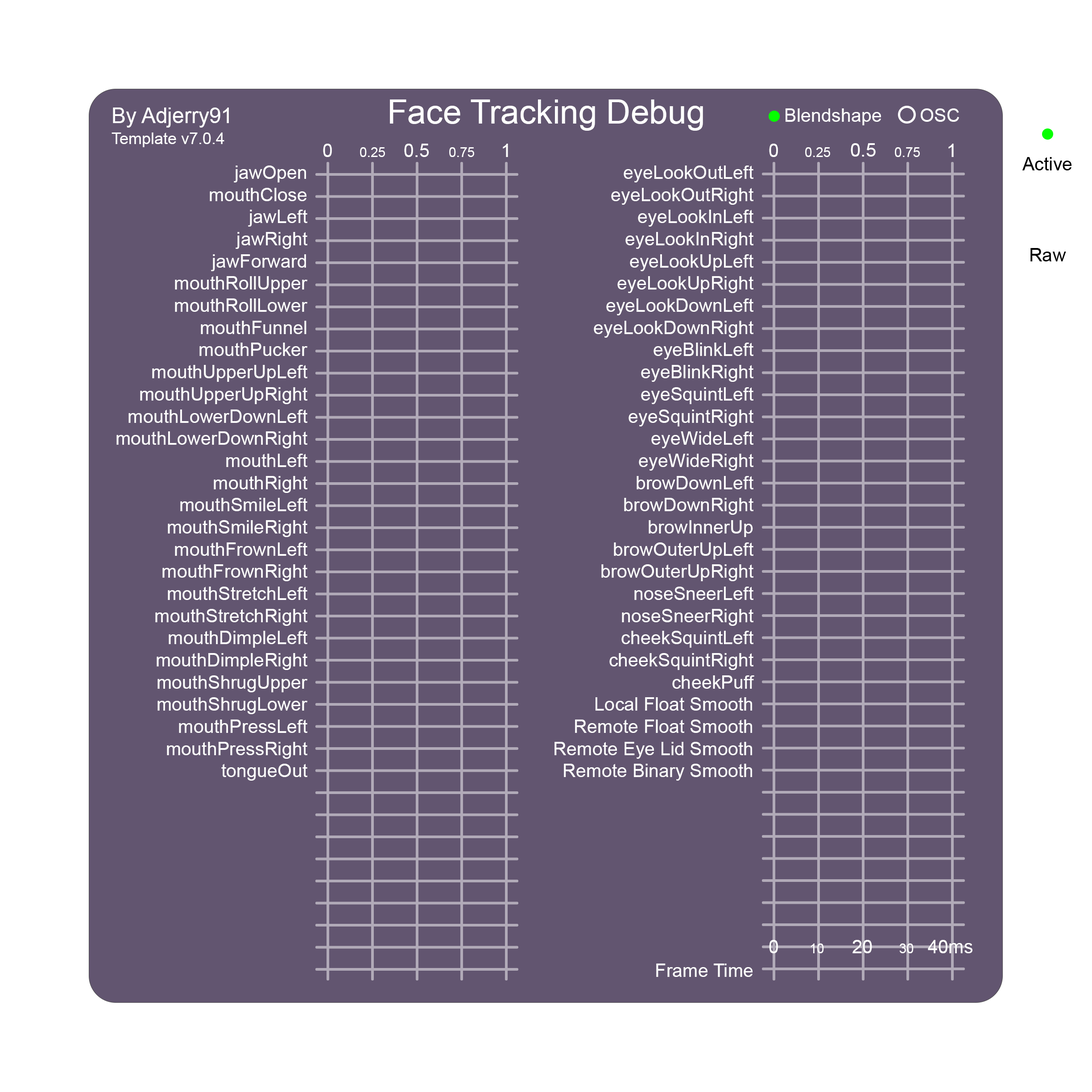
<style>
.page{position:relative;width:1092px;height:1092px;background:#625570}
.page>*{position:absolute;margin:0}
.t1{font:33.5px "ArialMT";color:#ffffff}
.t2{font:21.4px "ArialMT";color:#ffffff}
.t3{font:18.5px "ArialMT";color:#ffffff}
.t4{font:16.1px "ArialMT";color:#ffffff}
.t5{font:13.4px "ArialMT";color:#ffffff}
.t6{font:18.6px "ArialMT";color:#ffffff}
.t7{font:18.5px "ArialMT";color:#000000}
.t8{font:18.7px "ArialMT";color:#ffffff}
</style>
<div class="page">
<p class="t1" style="left:390px;top:99px;width:313px;height:32px">Face Tracking Debug</p>
<p class="t2" style="left:113px;top:108px;width:116px;height:20px">By Adjerry91</p>
<p class="t3" style="left:786px;top:108px;width:95px;height:17px">Blendshape</p>
<p class="t3" style="left:921px;top:108px;width:38px;height:14px">OSC</p>
<p class="t4" style="left:112px;top:132px;width:112px;height:15px">Template v7.0.4</p>
<p class="t3" style="left:323px;top:144px;width:9px;height:13px">0</p>
<p class="t5" style="left:360px;top:147px;width:25px;height:10px">0.25</p>
<p class="t3" style="left:404px;top:144px;width:25px;height:13px">0.5</p>
<p class="t5" style="left:449px;top:147px;width:25px;height:10px">0.75</p>
<p class="t3" style="left:503px;top:144px;width:5px;height:13px">1</p>
<p class="t3" style="left:769px;top:144px;width:9px;height:13px">0</p>
<p class="t5" style="left:805px;top:147px;width:25px;height:10px">0.25</p>
<p class="t6" style="left:851px;top:143px;width:25px;height:14px">0.5</p>
<p class="t5" style="left:895px;top:147px;width:25px;height:10px">0.75</p>
<p class="t3" style="left:948px;top:144px;width:6px;height:13px">1</p>
<p class="t7" style="left:1022px;top:157px;width:49px;height:13px">Active</p>
<p class="t3" style="left:116px;top:165px;width:192px;height:616px;text-align:right">jawOpen<br>mouthClose<br>jawLeft<br>jawRight<br>jawForward<br>mouthRollUpper<br>mouthRollLower<br>mouthFunnel<br>mouthPucker<br>mouthUpperUpLeft<br>mouthUpperUpRight<br>mouthLowerDownLeft<br>mouthLowerDownRight<br>mouthLeft<br>mouthRight<br>mouthSmileLeft<br>mouthSmileRight<br>mouthFrownLeft<br>mouthFrownRight<br>mouthStretchLeft<br>mouthStretchRight<br>mouthDimpleLeft<br>mouthDimpleRight<br>mouthShrugUpper<br>mouthShrugLower<br>mouthPressLeft<br>mouthPressRight<br>tongueOut</p>
<p class="t3" style="left:554px;top:165px;width:200px;height:812px;text-align:right">eyeLookOutLeft<br>eyeLookOutRight<br>eyeLookInLeft<br>eyeLookInRight<br>eyeLookUpLeft<br>eyeLookUpRight<br>eyeLookDownLeft<br>eyeLookDownRight<br>eyeBlinkLeft<br>eyeBlinkRight<br>eyeSquintLeft<br>eyeSquintRight<br>eyeWideLeft<br>eyeWideRight<br>browDownLeft<br>browDownRight<br>browInnerUp<br>browOuterUpLeft<br>browOuterUpRight<br>noseSneerLeft<br>noseSneerRight<br>cheekSquintLeft<br>cheekSquintRight<br>cheekPuff<br>Local Float Smooth<br>Remote Float Smooth<br>Remote Eye Lid Smooth<br>Remote Binary Smooth<br><br><br><br><br><br><br><br><br>Frame Time</p>
<p class="t7" style="left:1030px;top:248px;width:36px;height:13px">Raw</p>
<p class="t3" style="left:769px;top:940px;width:9px;height:13px">0</p>
<p class="t8" style="left:852px;top:940px;width:20px;height:13px">20</p>
<p class="t3" style="left:928px;top:940px;width:44px;height:13px">40ms</p>
<p class="t5" style="left:811px;top:943px;width:13px;height:10px">10</p>
<p class="t5" style="left:899px;top:943px;width:15px;height:10px">30</p>
</div>
